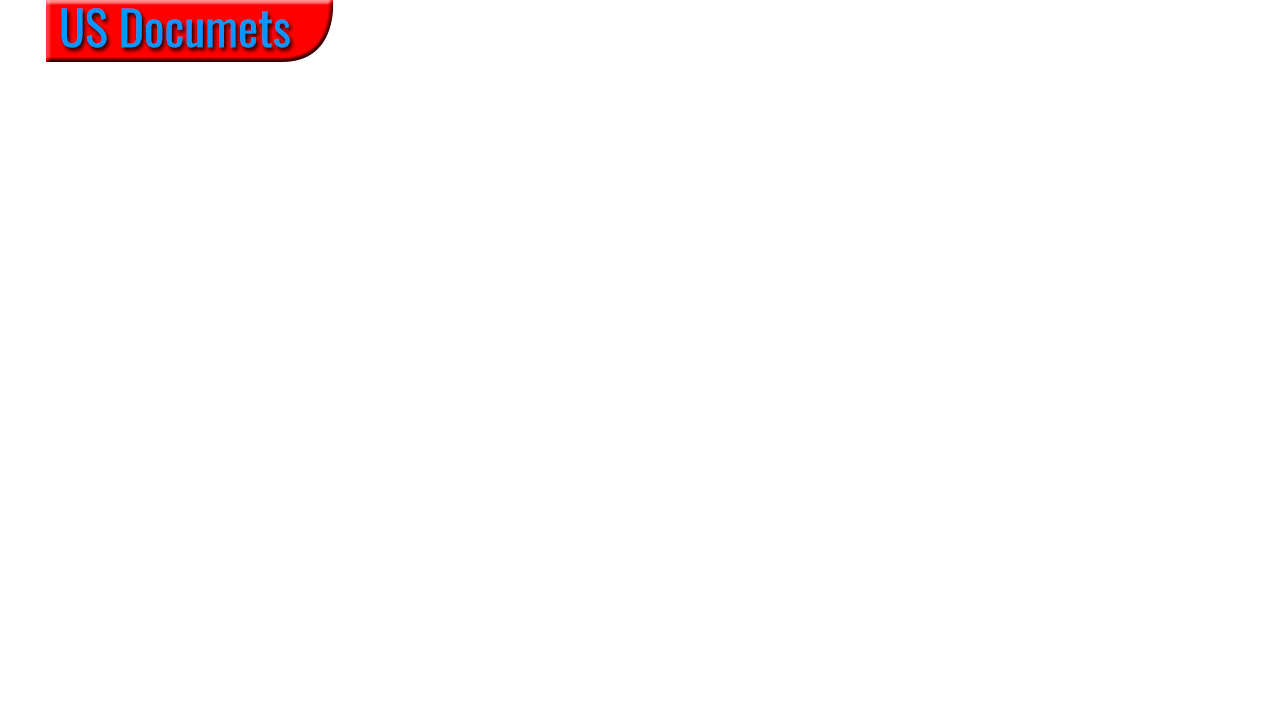
<style>
.page{position:relative;width:1280px;height:720px;background:#ffffff}
.page>*{position:absolute;margin:0}
.t1{font:47.8px "Oswald-Regular";color:#0397ff}
</style>
<div class="page">
<p class="t1" style="left:61px;top:8px;width:229px;height:40px">US Documets</p>
</div>
